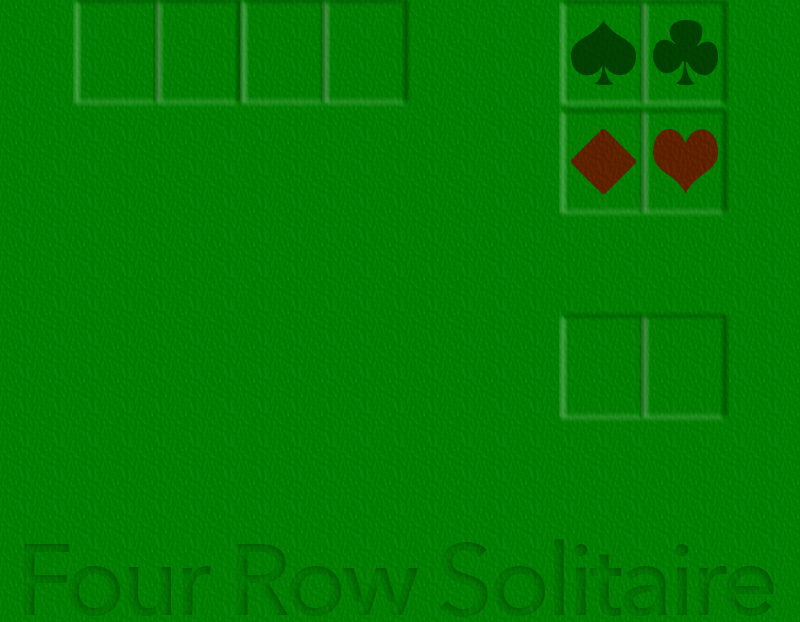
<style>
.page{position:relative;width:800px;height:622px}
.page>*{position:absolute;margin:0}
.t1{font:100px "AvenirNext-Medium";letter-spacing:-0.04em;color:#016e01}
</style>
<div class="page">
<p class="t1" style="left:24px;top:539px;width:750px;height:78px">Four Row Solitaire</p>
</div>
